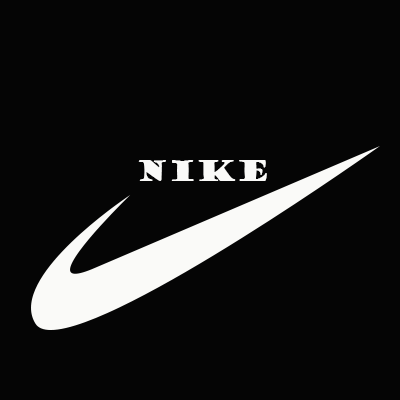
<style>
.page{position:relative;width:400px;height:400px;background:#050505}
.page>*{position:absolute;margin:0}
.t1{font:27.8px "GoudyStout";color:#fafaf8}
</style>
<div class="page">
<p class="t1" style="left:138px;top:160px;width:129px;height:21px">NIKE</p>
</div>
